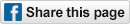
<style>
.page{position:relative;width:130px;height:25px}
.page>*{position:absolute;margin:0}
.t1{font:14px "Arial-BoldMT";letter-spacing:-0.025em;color:#171717}
</style>
<div class="page">
<p class="t1" style="left:26px;top:6px;width:99px;height:14px">Share this page</p>
</div>
